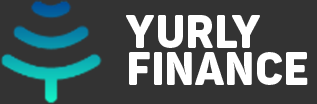
<style>
.page{position:relative;width:317px;height:104px;background:#333333}
.page>*{position:absolute;margin:0}
.t1{font:45.8px/37.5px "PantonNarrowDemo-Black";color:#ffffff}
</style>
<div class="page">
<p class="t1" style="left:126px;top:15px;width:182px;height:70px">Yurly<br>Finance</p>
</div>
